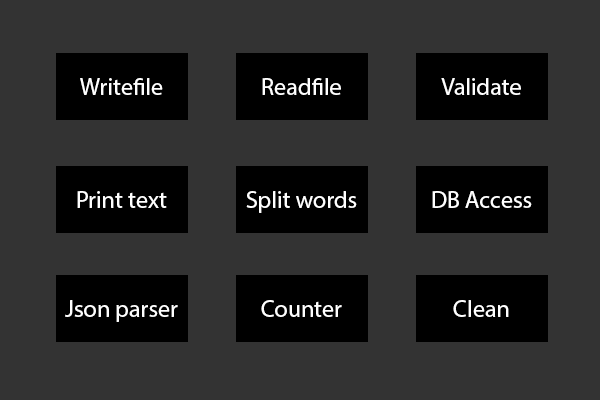
<style>
.page{position:relative;width:600px;height:400px;background:#333333}
.page>*{position:absolute;margin:0}
.t1{font:24px "MyriadPro-Regular";color:#ffffff}
</style>
<div class="page">
<p class="t1" style="left:80px;top:78px;width:83px;height:17px">Writefile</p>
<p class="t1" style="left:262px;top:78px;width:79px;height:17px">Readfile</p>
<p class="t1" style="left:441px;top:78px;width:80px;height:17px">Validate</p>
<p class="t1" style="left:77px;top:191px;width:90px;height:17px">Print text</p>
<p class="t1" style="left:246px;top:191px;width:111px;height:22px">Split words</p>
<p class="t1" style="left:432px;top:191px;width:100px;height:17px">DB Access</p>
<p class="t1" style="left:65px;top:300px;width:113px;height:22px">Json parser</p>
<p class="t1" style="left:261px;top:300px;width:81px;height:17px">Counter</p>
<p class="t1" style="left:453px;top:300px;width:56px;height:17px">Clean</p>
</div>
